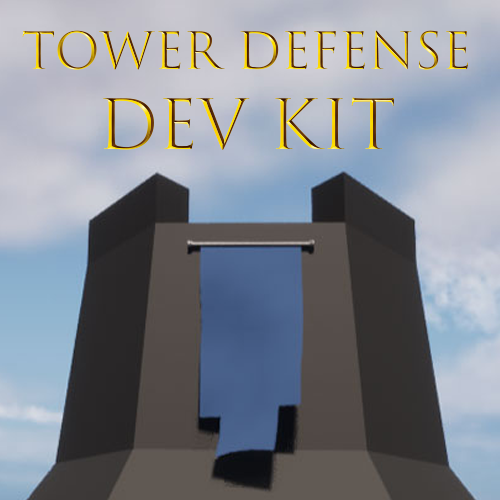
<style>
.page{position:relative;width:500px;height:500px}
.page>*{position:absolute;margin:0}
.t1{font:49.3px "TrajanColor-Concept"}
.t2{font:66.7px "TrajanColor-Concept"}
</style>
<div class="page">
<p class="t1" style="left:22px;top:30px;width:446px;height:120px;text-align:center">Tower Defense<br><span class="t2">Dev Kit</span></p>
</div>
